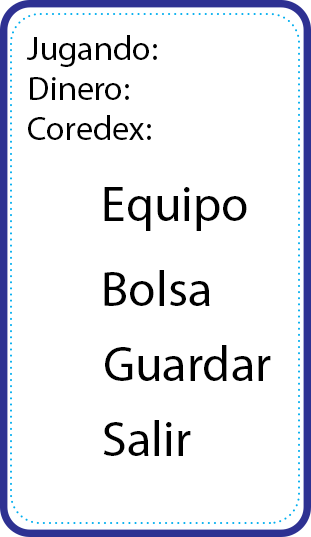
<style>
.page{position:relative;width:311px;height:537px;background:#ffffff}
.page>*{position:absolute;margin:0}
.t1{font:34.1px "MyriadPro-Regular";color:#000000}
.t2{font:50px "MyriadPro-Regular";color:#000000}
</style>
<div class="page">
<p class="t1" style="left:26px;top:35px;width:131px;height:32px">Jugando:</p>
<p class="t1" style="left:30px;top:77px;width:99px;height:23px">Dinero:</p>
<p class="t1" style="left:28px;top:115px;width:123px;height:25px">Coredex:</p>
<p class="t2" style="left:104px;top:187px;width:143px;height:44px">Equipo</p>
<p class="t2" style="left:104px;top:270px;width:106px;height:36px">Bolsa</p>
<p class="t2" style="left:105px;top:345px;width:166px;height:36px">Guardar</p>
<p class="t2" style="left:103px;top:420px;width:88px;height:36px">Salir</p>
</div>
